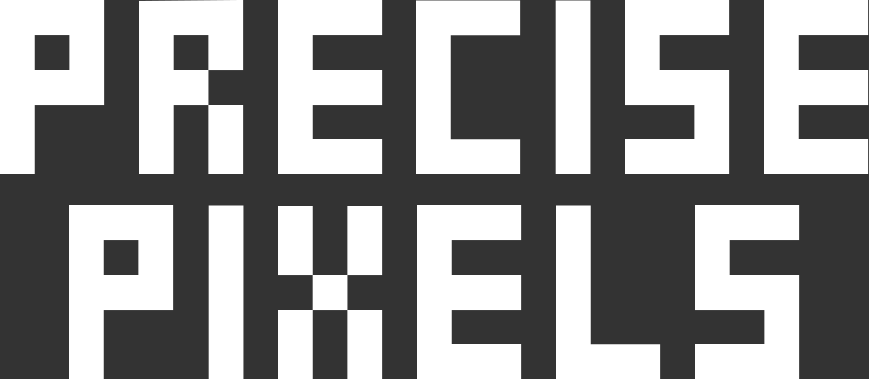
<style>
.page{position:relative;width:869px;height:379px;background:#333333}
.page>*{position:absolute;margin:0}
.t1{font:347px/205px "wendy";color:#ffffff}
</style>
<div class="page">
<p class="t1" style="left:0px;top:0px;width:869px;height:379px;text-align:center">PRECISE<br>PIXELS</p>
</div>
